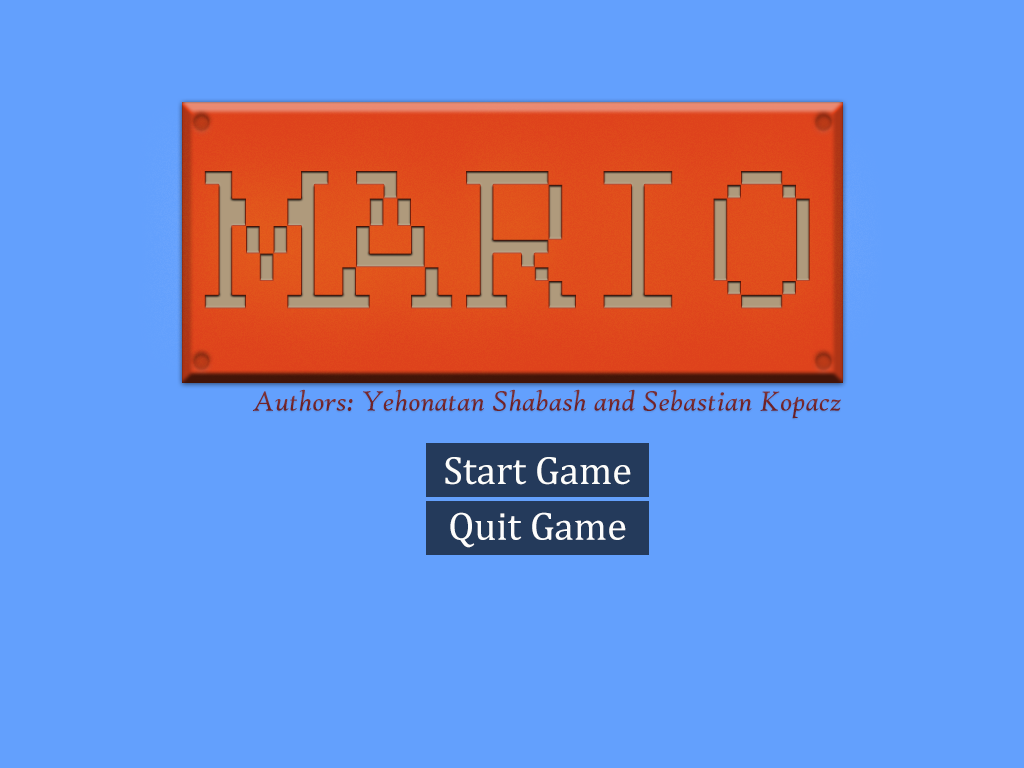
<style>
.page{position:relative;width:1024px;height:768px;background:#63a0fd}
.page>*{position:absolute;margin:0}
.t1{font:220px "Courier";color:#af9a7c}
.t2{font:30px "HighTowerText-Italic";color:#722429}
.t3{font:40px "CambriaMath";color:#fcfdfc}
.t4{font:40px "CambriaMath";color:#fdfdfd}
</style>
<div class="page">
<p class="t1" style="left:204px;top:171px;width:606px;height:138px">MARIO</p>
<p class="t2" style="left:253px;top:389px;width:588px;height:30px">Authors: Yehonatan Shabash and Sebastian Kopacz</p>
<p class="t3" style="left:445px;top:457px;width:186px;height:28px">Start Game</p>
<p class="t4" style="left:450px;top:512px;width:176px;height:36px">Quit Game</p>
</div>
